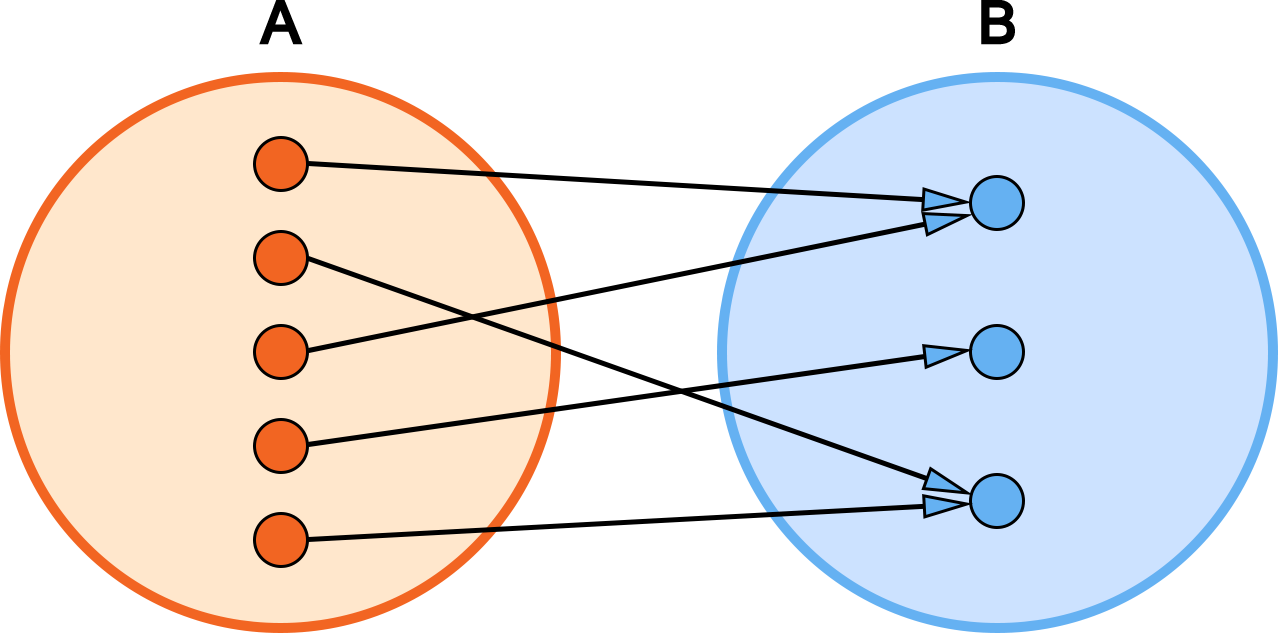
<style>
.page{position:relative;width:1278px;height:633px;background:#ffffff}
.page>*{position:absolute;margin:0}
.t1{font:60px "Kartika-Bold";color:#000000}
</style>
<div class="page">
<p class="t1" style="left:259px;top:0px;width:44px;height:45px">A</p>
<p class="t1" style="left:981px;top:0px;width:34px;height:45px">B</p>
</div>
